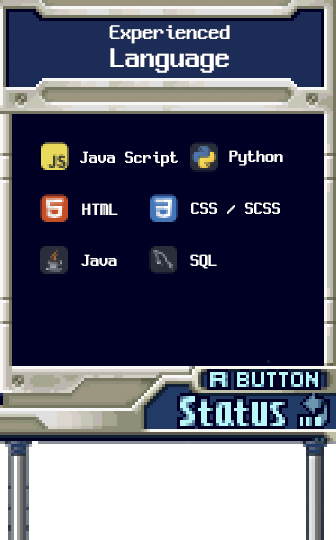
<style>
.page{position:relative;width:336px;height:540px;background:#000024}
.page>*{position:absolute;margin:0}
.t1{font:22px/22px "NeoDunggeunmo-Regular";color:#ffffff}
.t2{font:30px/30px "NeoDunggeunmo-Regular";color:#ffffff}
.t3{font:18px "NeoDunggeunmo-Regular";color:#ffffff}
</style>
<div class="page">
<p class="t1" style="left:109px;top:25px;width:121px;height:48px;text-align:center">Experienced<br><span class="t2">Language</span></p>
<p class="t3" style="left:229px;top:150px;width:54px;height:16px">Python</p>
<p class="t3" style="left:80px;top:151px;width:98px;height:16px">Java Script</p>
<p class="t3" style="left:82px;top:203px;width:36px;height:12px">HTML</p>
<p class="t3" style="left:191px;top:202px;width:89px;height:12px">CSS / SCSS</p>
<p class="t3" style="left:81px;top:254px;width:36px;height:12px">Java</p>
<p class="t3" style="left:190px;top:254px;width:27px;height:15px">SQL</p>
</div>
